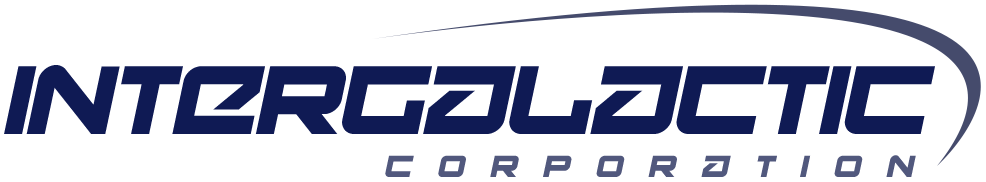
<style>
.page{position:relative;width:986px;height:182px;background:#ffffff}
.page>*{position:absolute;margin:0}
.t1{font:95px "Onky-Italic";color:#0f1a54}
.t2{font:30px "Onky-Italic";letter-spacing:0.88em;color:#51587d}
</style>
<div class="page">
<p class="t1" style="left:4px;top:65px;width:931px;height:69px">Intergalactic</p>
<p class="t2" style="left:385px;top:155px;width:531px;height:22px">Corporation</p>
</div>
